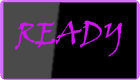
<style>
.page{position:relative;width:140px;height:80px;background:#000000}
.page>*{position:absolute;margin:0}
.t1{font:30px "VinerHandITC";color:#d015f2}
</style>
<div class="page">
<p class="t1" style="left:15px;top:20px;width:108px;height:37px">READY</p>
</div>
